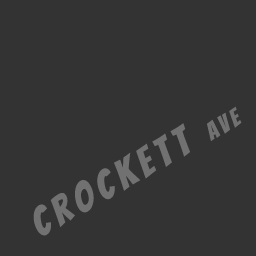
<style>
.page{position:relative;width:256px;height:256px;background:#333333}
.page>*{position:absolute;margin:0}
.t1{font:40px "Bangers-Regular";letter-spacing:0.16em;color:#717171}
.t2{font:24px "Bangers-Regular";letter-spacing:0.16em;color:#717171}
</style>
<div class="page">
<p class="t1" style="left:33px;top:106px;width:209px;height:130px;rotate:-30deg">Crockett <span class="t2">AVE</span></p>
</div>
